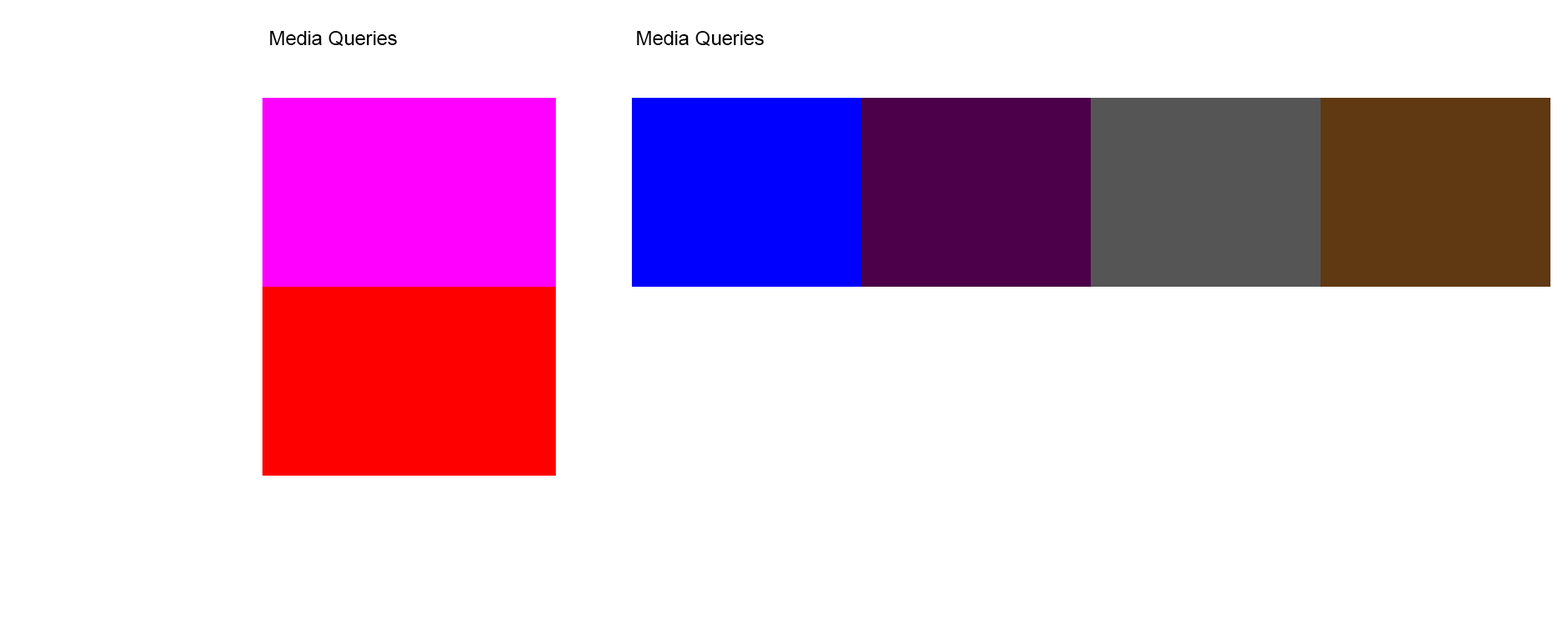
<style>
.page{position:relative;width:1568px;height:642px;background:#ffffff}
.page>*{position:absolute;margin:0}
.t1{font:20.1px "ArialMT";color:#000000}
</style>
<div class="page">
<p class="t1" style="left:270px;top:31px;width:127px;height:15px">Media Queries</p>
<p class="t1" style="left:637px;top:31px;width:127px;height:15px">Media Queries</p>
</div>
